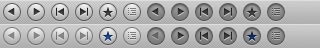
<style>
.page{position:relative;width:320px;height:48px}
.page>*{position:absolute;margin:0}
.t1{font:10px "HiraKakuProN-W3";color:#454545}
.t2{font:10px "HiraKakuProN-W3"}
.t3{font:10px "HiraKakuProN-W3";color:#0e2c5c}
</style>
<div class="page">
<p class="t1" style="left:103px;top:7px;width:10px;height:10px">★</p>
<p class="t1" style="left:247px;top:7px;width:10px;height:10px">★</p>
<p class="t2" style="left:103px;top:31px;width:10px;height:10px">★</p>
<p class="t3" style="left:247px;top:31px;width:10px;height:10px">★</p>
</div>
